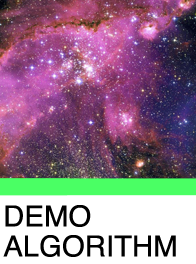
<style>
.page{position:relative;width:196px;height:264px}
.page>*{position:absolute;margin:0}
.t1{font:28.9px/30px "Helvetica";color:#000000}
</style>
<div class="page">
<p class="t1" style="left:3px;top:205px;width:173px;height:52px">DEMO<br>ALGORITHM</p>
</div>
